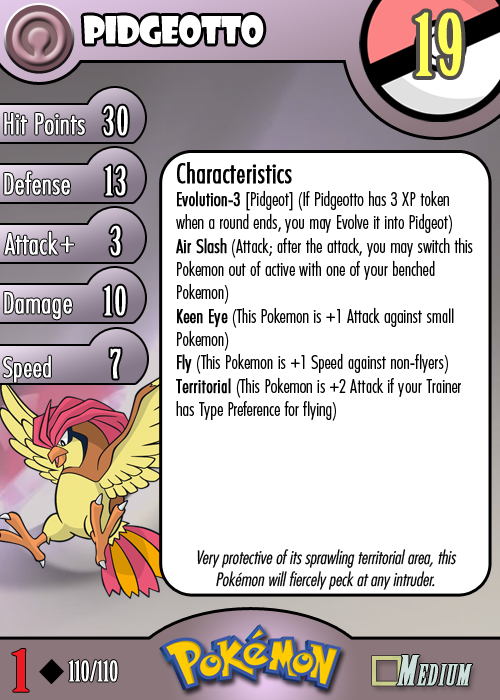
<style>
.page{position:relative;width:500px;height:700px;background:#ffffff}
.page>*{position:absolute;margin:0}
.t1{font:36.7px "ShowcardGothic-Reg";letter-spacing:-0.025em;color:#ffffff;scale:0.91 1}
.t2{font:83.3px "BirchStd";letter-spacing:0.025em;color:#fffd59;font-weight:bold}
.t3{font:27.8px "Futura-CondensedLight";color:#ffffff;font-weight:bold}
.t4{font:38.9px "BirchStd";letter-spacing:0.035em;color:#ffffff;font-weight:bold}
.t5{font:19.4px "FuturaCondensedBQ-Light";color:#010101}
.t6{font:27.8px "FuturaCondensedBQ-Light";color:#010101;font-weight:bold}
.t7{font:19.4px "FuturaCondensedBQ-Light";color:#010101;font-weight:bold}
.t8{font:30.6px "Futura-CondensedLight";color:#ffffff;font-weight:bold}
.t9{font:27.8px "FuturaCondensedBQ-Light";color:#ffffff;font-weight:bold}
.t10{font:18.1px "Futura-CondensedLight";color:#010101;font-style:italic}
.t11{font:55.6px "BirchStd";color:#ed1c24;font-weight:bold;scale:1.5 1}
.t12{font:27.8px "BirchStd";color:#ffffff;font-weight:bold}
</style>
<div class="page">
<p class="t1" style="left:83px;top:15px;width:181px;height:30px">pidgeotto</p>
<p class="t2" style="left:415px;top:12px;width:47px;height:64px">19</p>
<p class="t3" style="left:4px;top:113px;width:81px;height:22px">Hit Points</p>
<p class="t4" style="left:103px;top:105px;width:25px;height:31px">30</p>
<p class="t3" style="left:4px;top:171px;width:66px;height:24px">Defense</p>
<p class="t4" style="left:105px;top:165px;width:21px;height:31px">13</p>
<p class="t5" style="left:176px;top:162px;width:297px;height:259px"><span class="t6">Characteristics<br></span><span class="t7">Evolution-3 </span>[Pidgeot] (If Pidgeotto has 3 XP token when a round ends, you may Evolve it into Pidgeot)<br><span class="t7">Air Slash</span> (Attack; after the attack, you may switch this Pokemon out of active with one of your benched Pokemon)<br><span class="t7">Keen Eye</span> (This Pokemon is +1 Attack against small Pokemon)<br><span class="t7">Fly</span> (This Pokemon is +1 Speed against non-flyers)<br><span class="t7">Territorial</span> (This Pokemon is +2 Attack if your Trainer has Type Preference for flying)</p>
<p class="t3" style="left:4px;top:231px;width:54px;height:24px">Attack</p>
<p class="t4" style="left:110px;top:225px;width:11px;height:31px">3</p>
<p class="t8" style="left:60px;top:236px;width:14px;height:17px">+</p>
<p class="t3" style="left:4px;top:292px;width:68px;height:28px">Damage</p>
<p class="t4" style="left:104px;top:285px;width:22px;height:31px">10</p>
<p class="t4" style="left:110px;top:348px;width:11px;height:31px">7</p>
<p class="t9" style="left:3px;top:355px;width:48px;height:28px">Speed</p>
<p class="t10" style="left:197px;top:549px;width:260px;height:41px;text-align:center">Very protective of its sprawling territorial area, this Pokémon will fiercely peck at any intruder.</p>
<p class="t11" style="left:12px;top:649px;width:17px;height:43px">1</p>
<p class="t12" style="left:68px;top:660px;width:50px;height:22px">110/110</p>
</div>
